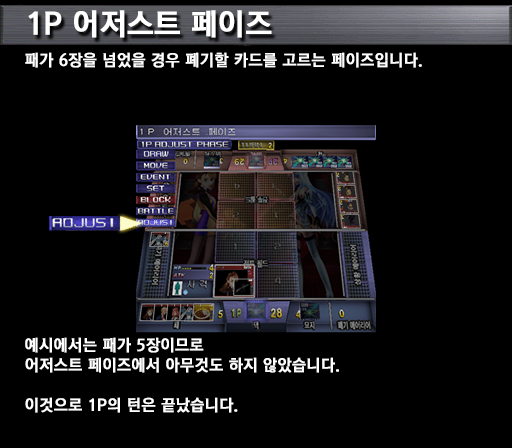
<style>
.page{position:relative;width:512px;height:448px;background:#000000}
.page>*{position:absolute;margin:0}
.t1{font:30px "KoreanGD15-R";color:#ffffff;font-weight:bold}
.t2{font:16px "KoreanGD15-R";color:#ffffff;font-weight:bold}
.t3{font:16px/20px "KoreanGD15-R";color:#ffffff;font-weight:bold}
</style>
<div class="page">
<p class="t1" style="left:28px;top:10px;width:244px;height:28px">1P 어저스트 페이즈</p>
<p class="t2" style="left:25px;top:52px;width:397px;height:16px">패가 6장을 넘었을 경우 폐기할 카드를 고르는 페이즈입니다.</p>
<p class="t3" style="left:25px;top:337px;width:314px;height:76px">예시에서는 패가 5장이므로<br>어저스트 페이즈에서 아무것도 하지 않았습니다.<br><br>이것으로 1P의 턴은 끝났습니다.</p>
</div>
